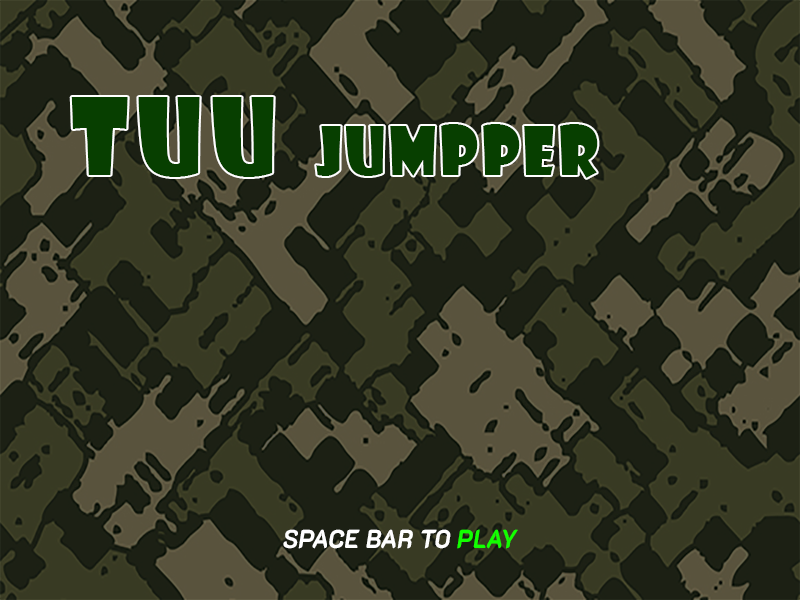
<style>
.page{position:relative;width:800px;height:600px;background:#1c2014}
.page>*{position:absolute;margin:0}
.t1{font:64.8px "ShowcardGothic-Reg";letter-spacing:0.06em;color:#073f00;scale:0.89 1}
.t2{font:103.6px "ShowcardGothic-Reg";letter-spacing:0.1em;color:#073f00;scale:0.89 1}
.t3{font:103.6px "ShowcardGothic-Reg";letter-spacing:0.08em;color:#073f00;scale:0.89 1}
.t4{font:25.9px "K2D-ExtraBoldItalic";letter-spacing:0.02em;color:#ffffff;scale:0.89 1}
.t5{font:25.9px "K2D-ExtraBoldItalic";letter-spacing:0.02em;color:#12ff00;scale:0.89 1}
</style>
<div class="page">
<p class="t1" style="left:71px;top:97px;width:527px;height:81px"><span class="t2">TU</span><span class="t3">U  </span>JUMPPER</p>
<p class="t4" style="left:283px;top:529px;width:235px;height:20px">SPACE BAR TO <span class="t5">PLAY</span></p>
</div>
